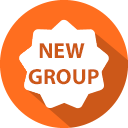
<style>
.page{position:relative;width:128px;height:128px;background:#ffffff}
.page>*{position:absolute;margin:0}
.t1{font:22px "MyriadPro-Bold";color:#cc5819}
</style>
<div class="page">
<p class="t1" style="left:28px;top:43px;width:71px;height:42px;text-align:center">NEW <br>GROUP</p>
</div>
